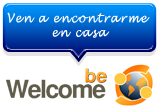
<style>
.page{position:relative;width:160px;height:106px;background:#ffffff}
.page>*{position:absolute;margin:0}
.t1{font:12px "LucidaHandwriting-Italic";letter-spacing:0.1em;color:#ffffff;font-weight:bold;scale:0.9 1}
</style>
<div class="page">
<p class="t1" style="left:7px;top:12px;width:143px;height:26px;text-align:center">Ven a encontrarme <br>en casa</p>
</div>
